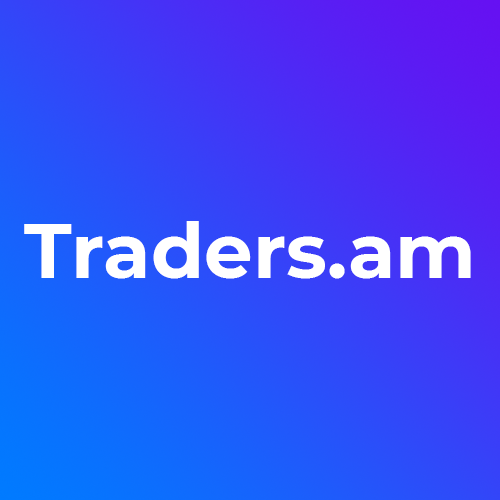
<style>
.page{position:relative;width:500px;height:500px}
.page>*{position:absolute;margin:0}
.t1{font:77px "Montserrat-Bold";color:#ffffff}
</style>
<div class="page">
<p class="t1" style="left:24px;top:221px;width:447px;height:58px">Traders.am</p>
</div>
